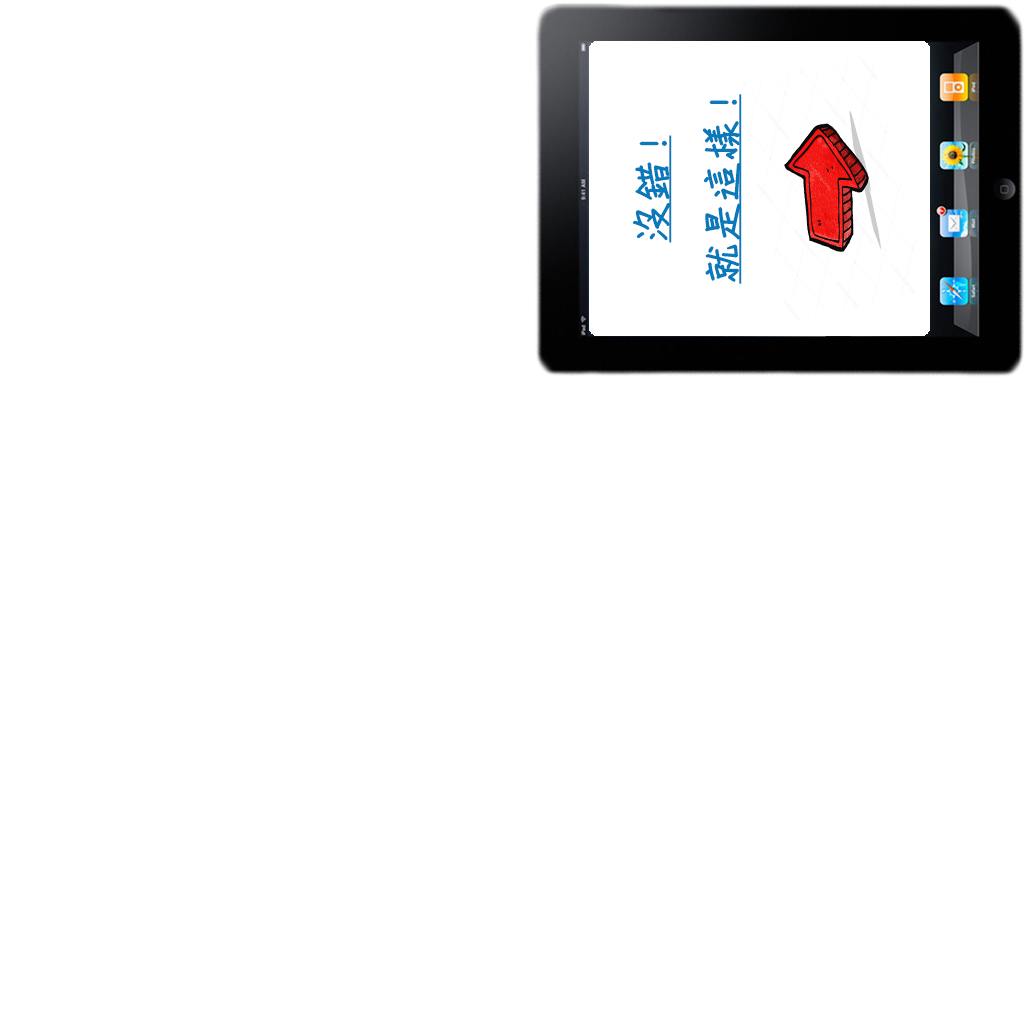
<style>
.page{position:relative;width:1024px;height:1024px;background:#ffffff}
.page>*{position:absolute;margin:0}
.t1{font:40px "DFChu-W4-WINP-BF";color:#0979ba;font-weight:bold;text-decoration:underline}
</style>
<div class="page">
<p class="t1" style="left:632px;top:94px;width:110px;height:190px;text-align:center;rotate:-90deg">沒錯!<br>就是這樣!</p>
</div>
